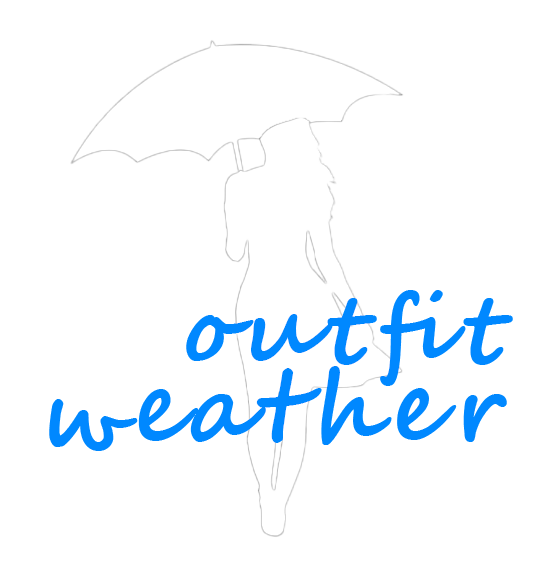
<style>
.page{position:relative;width:539px;height:576px;background:#ffffff}
.page>*{position:absolute;margin:0}
.t1{font:96px "SegoeScript-Bold";letter-spacing:0.025em;color:#0088ff}
</style>
<div class="page">
<p class="t1" style="left:49px;top:290px;width:464px;height:161px">outfit weather</p>
</div>
